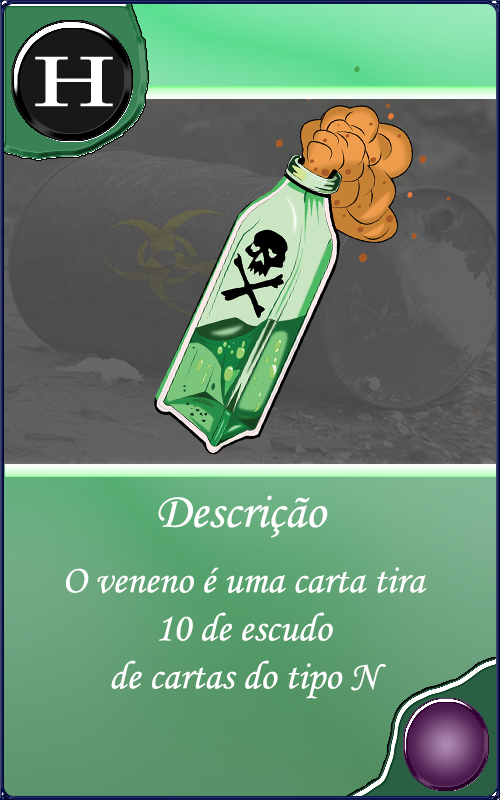
<style>
.page{position:relative;width:500px;height:800px}
.page>*{position:absolute;margin:0}
.t1{font:50px "MonotypeCorsiva";color:#fffefe}
.t2{font:40px "MonotypeCorsiva";color:#fffefe}
</style>
<div class="page">
<p class="t1" style="left:158px;top:495px;width:170px;height:43px">Descrição</p>
<p class="t2" style="left:66px;top:567px;width:361px;height:132px;text-align:center">O veneno é uma carta tira<br> 10 de escudo <br>de cartas do tipo N</p>
</div>
